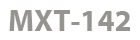
<style>
.page{position:relative;width:140px;height:40px;background:#ffffff}
.page>*{position:absolute;margin:0}
.t1{font:30px "Myriad-BdWeb";color:#959490}
</style>
<div class="page">
<p class="t1" style="left:9px;top:10px;width:121px;height:21px">MXT-142</p>
</div>
